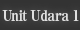
<style>
.page{position:relative;width:80px;height:30px}
.page>*{position:absolute;margin:0}
.t1{font:15px "RyuminPro-ExBold";letter-spacing:-0.04em;color:#dfdfdf;scale:0.9 1}
</style>
<div class="page">
<p class="t1" style="left:2px;top:10px;width:77px;height:11px">Unit Udara 1</p>
</div>
